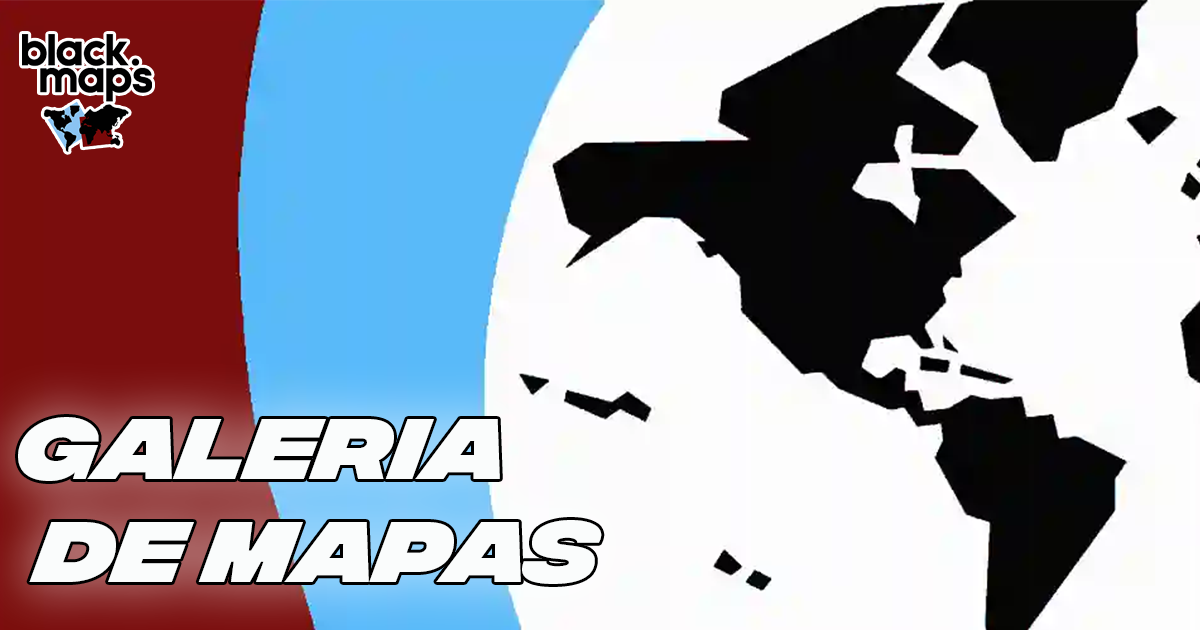
<style>
.page{position:relative;width:1200px;height:630px}
.page>*{position:absolute;margin:0}
.t1{font:85.7px "FONTSPRINGDEMO-IntegralCFHeavyItalic";color:#fafcfc;scale:1.13 1}
</style>
<div class="page">
<p class="t1" style="left:18px;top:417px;width:584px;height:167px">GALERIA<br> DE MAPAS</p>
</div>
